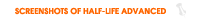
<style>
.page{position:relative;width:200px;height:20px;background:#ffffff}
.page>*{position:absolute;margin:0}
.t1{font:8px "Atlanta-Demi";color:#ff6600}
</style>
<div class="page">
<p class="t1" style="left:15px;top:7px;width:151px;height:8px">SCREENSHOTS OF HALF-LIFE ADVANCED</p>
</div>
